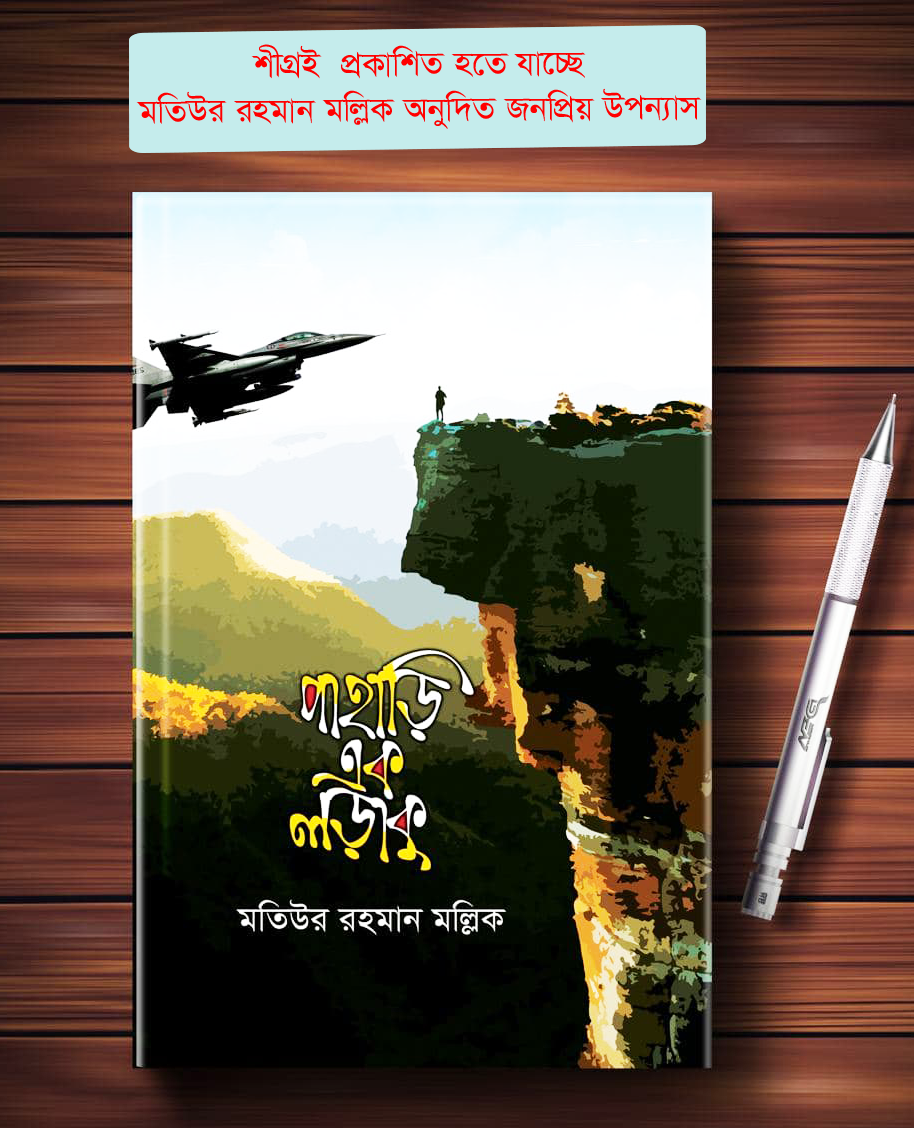
<style>
.page{position:relative;width:914px;height:1128px}
.page>*{position:absolute;margin:0}
.t1{font:40px/45.3px "SutonnyMJ";color:#ff0000}
</style>
<div class="page">
<p class="t1" style="left:136px;top:44px;width:566px;height:85px;text-align:center">kxMÖB  cÖKvwkZ n‡Z hv‡”Q <br>gwZDi ingvb gwjøK Abyw`Z RbwcÖq Dcb¨vm</p>
</div>
